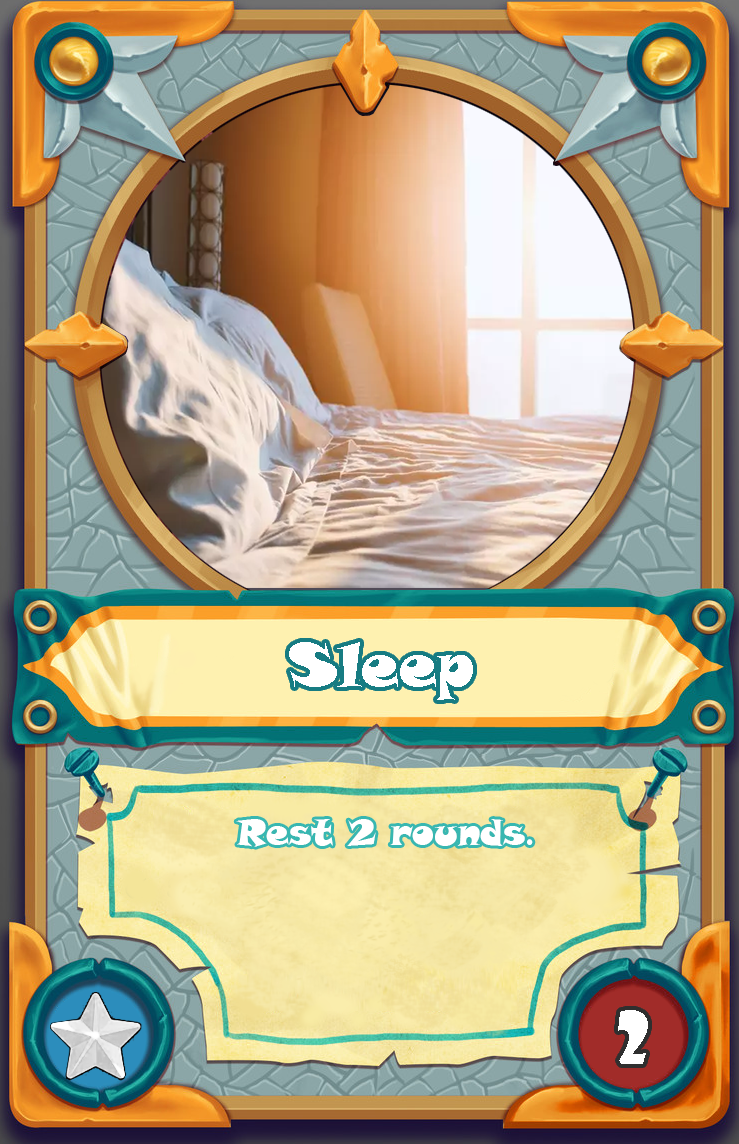
<style>
.page{position:relative;width:739px;height:1144px}
.page>*{position:absolute;margin:0}
.t1{font:60px "SnapITC-Regular";color:#ffffff}
.t2{font:36px "SnapITC-Regular";color:#ffffff}
.t3{font:36px "AdobeHeitiStd-Regular";color:#ffffff}
.t4{font:72px "ShowcardGothic-Reg";color:#ffffff}
</style>
<div class="page">
<p class="t1" style="left:289px;top:642px;width:184px;height:58px">Sleep</p>
<p class="t2" style="left:236px;top:819px;width:297px;height:28px">Rest 2 rounds<span class="t3">.</span></p>
<p class="t4" style="left:618px;top:1010px;width:30px;height:54px">2</p>
</div>
